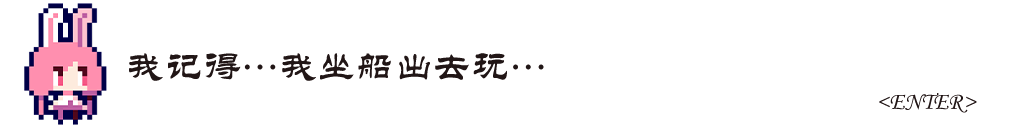
<style>
.page{position:relative;width:1024px;height:128px;background:#ffffff}
.page>*{position:absolute;margin:0}
.t1{font:38.3px "STLiti";color:#211616}
.t2{font:12px "STLiti";color:#211616}
</style>
<div class="page">
<p class="t1" style="left:129px;top:53px;width:415px;height:28px">我记得…我坐船出去玩…</p>
<p class="t2" style="left:879px;top:93px;width:98px;height:20px">&lt;ENTER&gt;</p>
</div>
